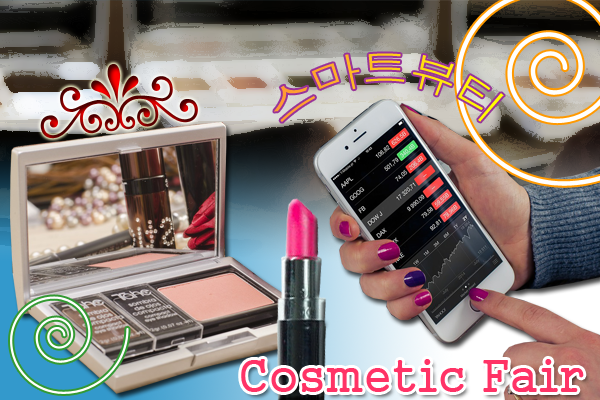
<style>
.page{position:relative;width:600px;height:400px}
.page>*{position:absolute;margin:0}
.t1{font:40px/50px "Dotum"}
.t2{font:45px "Gungsuh";color:#ff3366}
</style>
<div class="page">
<p class="t1" style="left:274px;top:53px;width:230px;height:69px">스마트뷰티</p>
<p class="t2" style="left:241px;top:359px;width:343px;height:33px">Cosmetic Fair</p>
</div>
